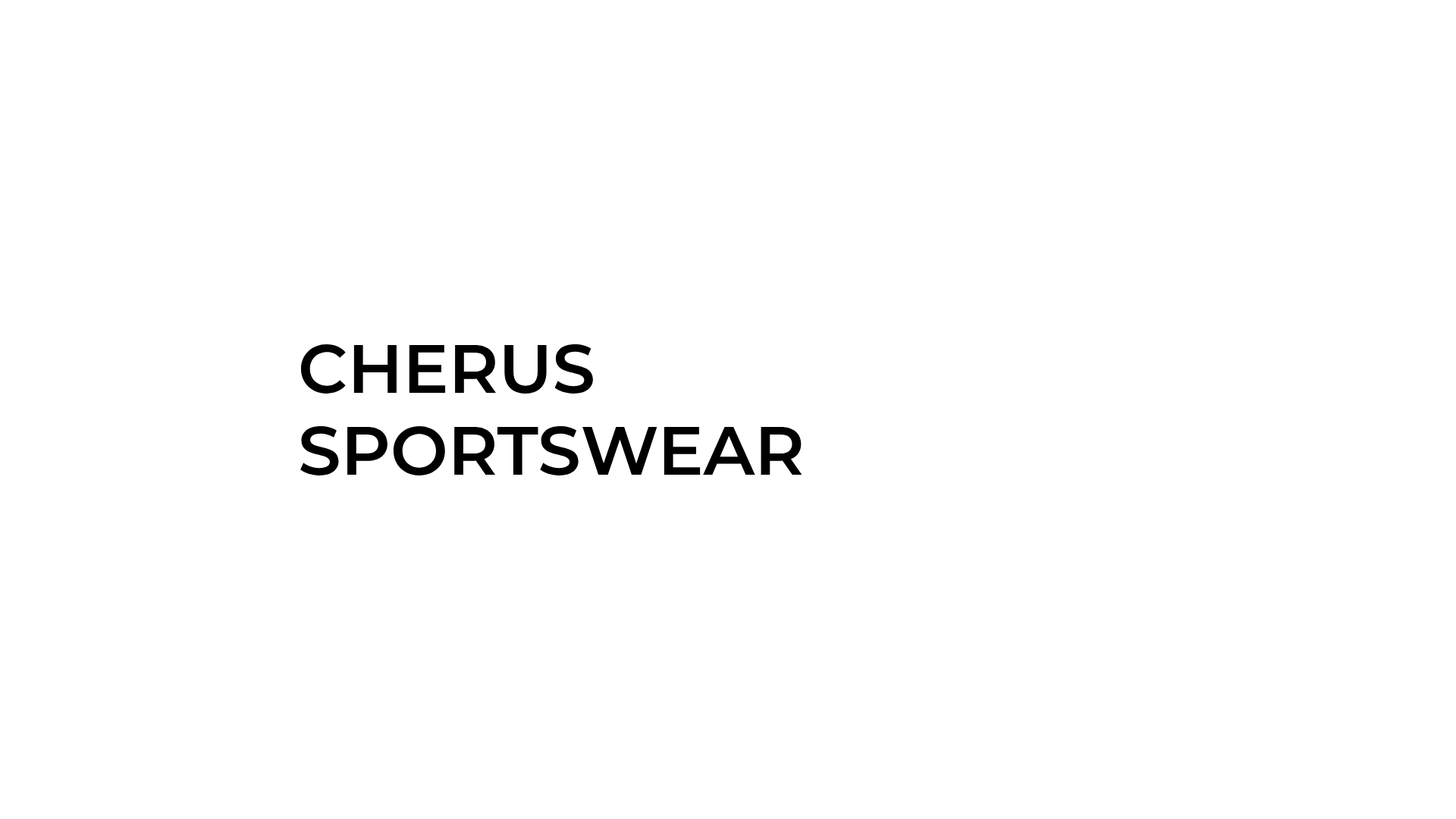
<style>
.page{position:relative;width:1456px;height:819px;background:#ffffff}
.page>*{position:absolute;margin:0}
.t1{font:68.2px "Montserrat-SemiBold";color:#000000}
</style>
<div class="page">
<p class="t1" style="left:300px;top:344px;width:502px;height:131px">CHERUS <br>SPORTSWEAR</p>
</div>
